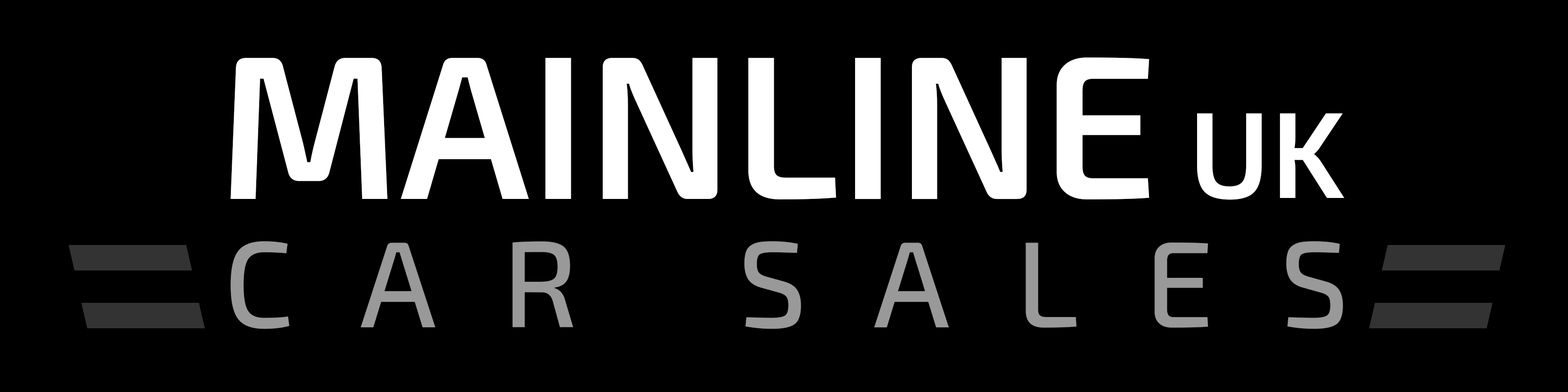
<style>
.page{position:relative;width:1568px;height:392px;background:#000000}
.page>*{position:absolute;margin:0}
.t1{font:204.2px "Exo2-SemiBold";color:#ffffff}
.t2{font:122.5px "Exo2-SemiBold";color:#ffffff}
.t3{font:122.5px "Exo2-Medium";letter-spacing:0.54em;color:#999999}
</style>
<div class="page">
<p class="t1" style="left:230px;top:57px;width:920px;height:142px">MAINLINE</p>
<p class="t2" style="left:1197px;top:113px;width:148px;height:87px">UK</p>
<p class="t3" style="left:230px;top:241px;width:1113px;height:88px">CAR SALES</p>
</div>
